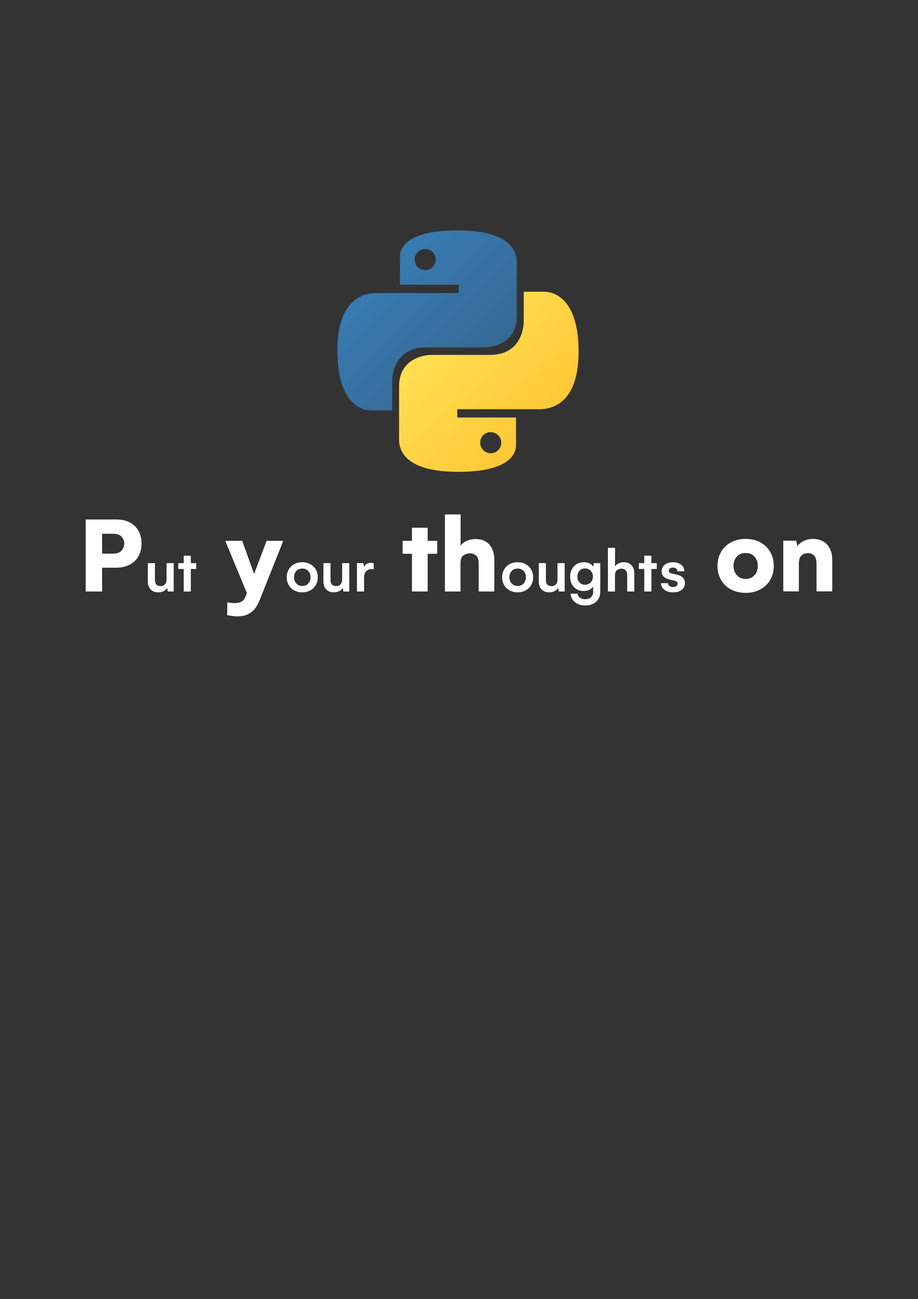
<style>
.page{position:relative;width:918px;height:1299px;background:#333333}
.page>*{position:absolute;margin:0}
.t1{font:63.5px "Gelion-Medium";color:#fefefe}
.t2{font:112.4px "Gelion-Bold";color:#fefefe}
</style>
<div class="page">
<p class="t1" style="left:86px;top:514px;width:747px;height:102px"><span class="t2">P</span>ut<span class="t2"> y</span>our<span class="t2"> th</span>oughts<span class="t2"> on</span></p>
</div>
